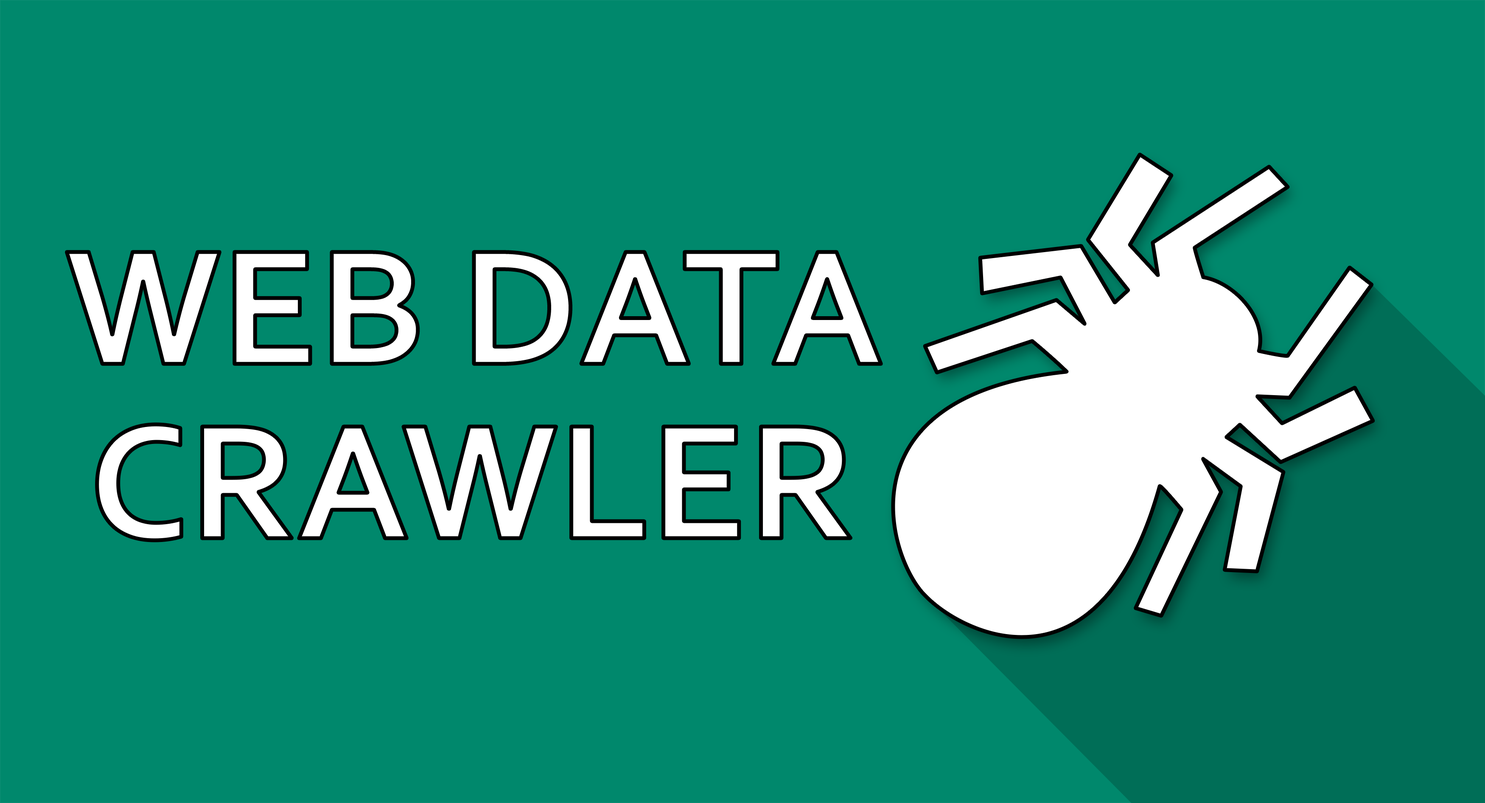
<style>
.page{position:relative;width:1485px;height:803px;background:#00886c}
.page>*{position:absolute;margin:0}
.t1{font:171px "Corbel-Bold";color:#ffffff}
</style>
<div class="page">
<p class="t1" style="left:67px;top:252px;width:814px;height:112px">WEB DATA</p>
<p class="t1" style="left:97px;top:424px;width:754px;height:116px">CRAWLER</p>
</div>
